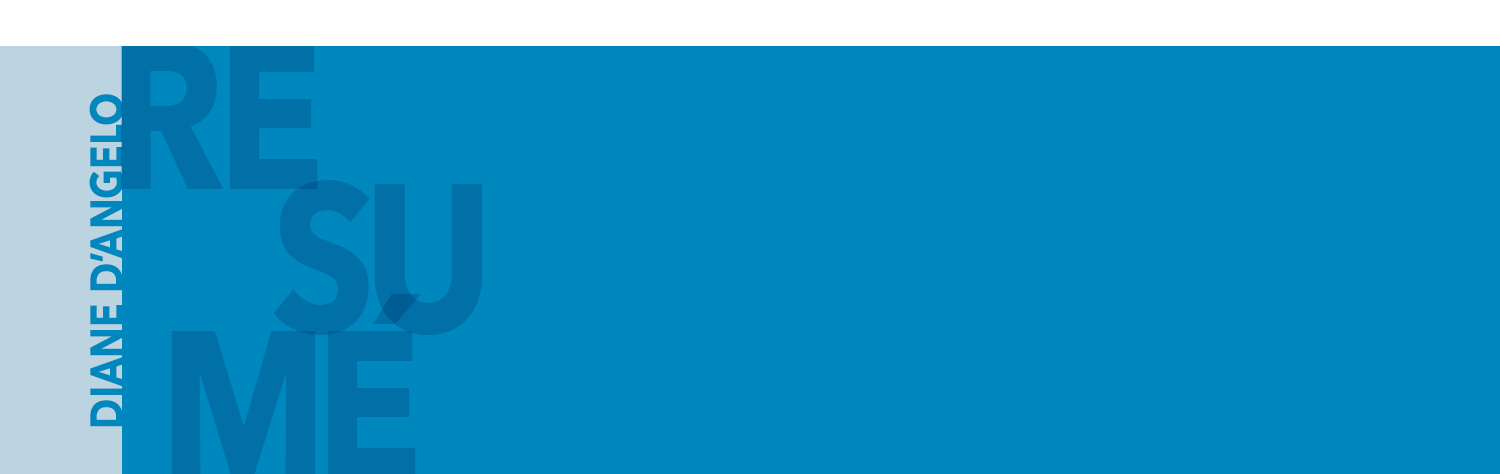
<style>
.page{position:relative;width:1500px;height:474px;background:#0087be}
.page>*{position:absolute;margin:0}
.t1{font:208.3px "AvenirNext-Bold";color:#0070a7;scale:0.85 1}
.t2{font:45.8px "AvenirNext-Bold";color:#0087be;scale:0.85 1}
.t3{font:208.3px "AvenirNext-Bold";color:#005d93;scale:0.85 1}
</style>
<div class="page">
<p class="t1" style="left:120px;top:42px;width:198px;height:147px">RE</p>
<p class="t2" style="left:89px;top:94px;width:35px;height:333px;rotate:-90deg">DIANE D’ANGELO</p>
<p class="t1" style="left:273px;top:180px;width:210px;height:155px">SU</p>
<p class="t3" style="left:373px;top:294px;width:48px;height:30px">´</p>
</div>
